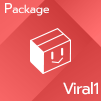
<style>
.page{position:relative;width:101px;height:101px}
.page>*{position:absolute;margin:0}
.t1{font:11px "Prompt-Regular";letter-spacing:-0.003em;color:#ffffff}
.t2{font:14px "Prompt-Regular";letter-spacing:-0.003em;color:#ffffff}
.t3{font:16.3px "Prompt-Regular";letter-spacing:-0.035em;color:#ffffff}
</style>
<div class="page">
<p class="t1" style="left:5px;top:3px;width:44px;height:13px"><span class="t2">P</span>ackage</p>
<p class="t3" style="left:63px;top:82px;width:35px;height:13px">Viral1</p>
</div>
